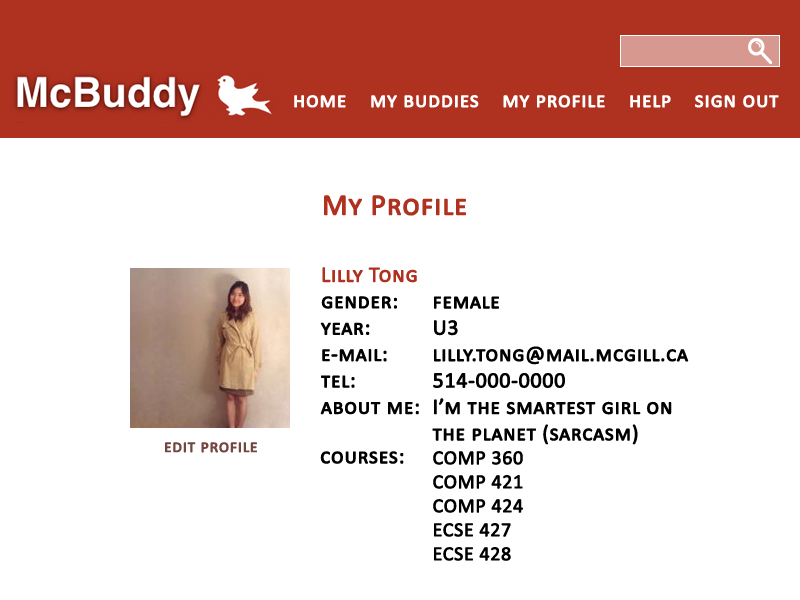
<style>
.page{position:relative;width:800px;height:600px;background:#ffffff}
.page>*{position:absolute;margin:0}
.t1{font:22px "Calibri";letter-spacing:0.005em;color:#ffffff;font-variant:small-caps;font-weight:bold}
.t2{font:30px "Calibri";letter-spacing:0.005em;color:#af3120;font-variant:small-caps;font-weight:bold}
.t3{font:22px "Calibri";letter-spacing:0.005em;color:#000000;font-variant:small-caps;font-weight:bold}
.t4{font:22px "Calibri";letter-spacing:0.005em;color:#af3120;font-variant:small-caps;font-weight:bold}
.t5{font:20px "Calibri";letter-spacing:0.005em;color:#000000;font-variant:small-caps;font-weight:bold}
.t6{font:18px "Calibri";letter-spacing:0.005em;color:#724741;font-variant:small-caps;font-weight:bold}
</style>
<div class="page">
<p class="t1" style="left:294px;top:95px;width:485px;height:13px">home    my buddies    my profile    help    sign out</p>
<p class="t2" style="left:324px;top:195px;width:142px;height:21px">My Profile</p>
<p class="t3" style="left:320px;top:267px;width:99px;height:148px"><span class="t4">Lilly Tong<br></span>gender:       <br>year: <br>e-mail: <br>tel:<br>about me:</p>
<p class="t3" style="left:432px;top:296px;width:257px;height:265px">female<br>U3<br>lilly.tong@mail.mcgill.ca<br>514-000-0000<br>I’m the smartest girl on<br>the planet (sarcasm)<br><span class="t5">COMP 360<br>COMP 421<br>COMP 424<br>ECSE 427<br>ECSE 428</span></p>
<p class="t6" style="left:165px;top:442px;width:92px;height:11px">edit profile</p>
<p class="t3" style="left:320px;top:451px;width:84px;height:13px">courses:</p>
</div>
